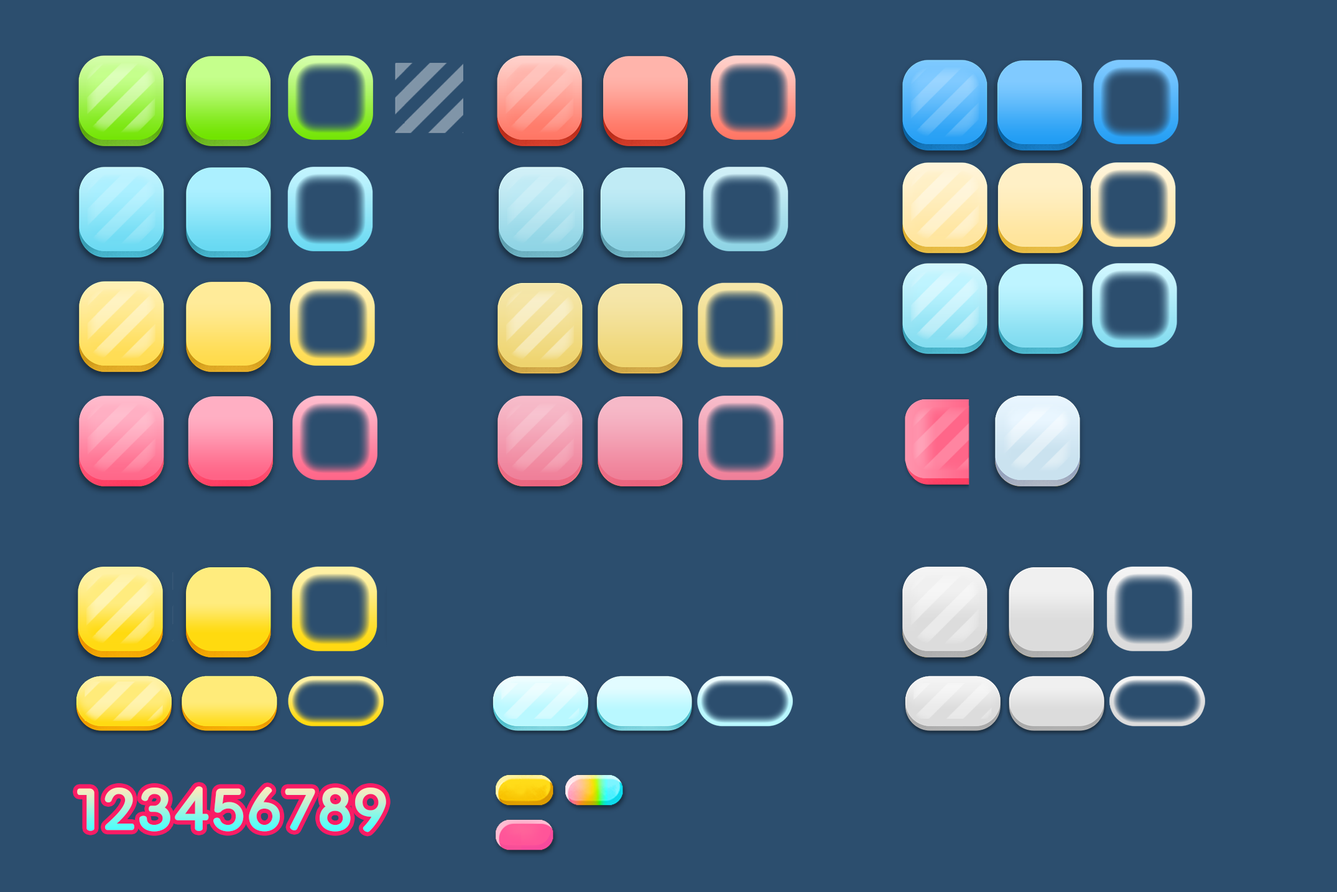
<style>
.page{position:relative;width:1337px;height:892px;background:#2c4e6e}
.page>*{position:absolute;margin:0}
.t1{font:63.6px "KoreanAT-R"}
</style>
<div class="page">
<p class="t1" style="left:77px;top:786px;width:309px;height:46px">123456789</p>
</div>
